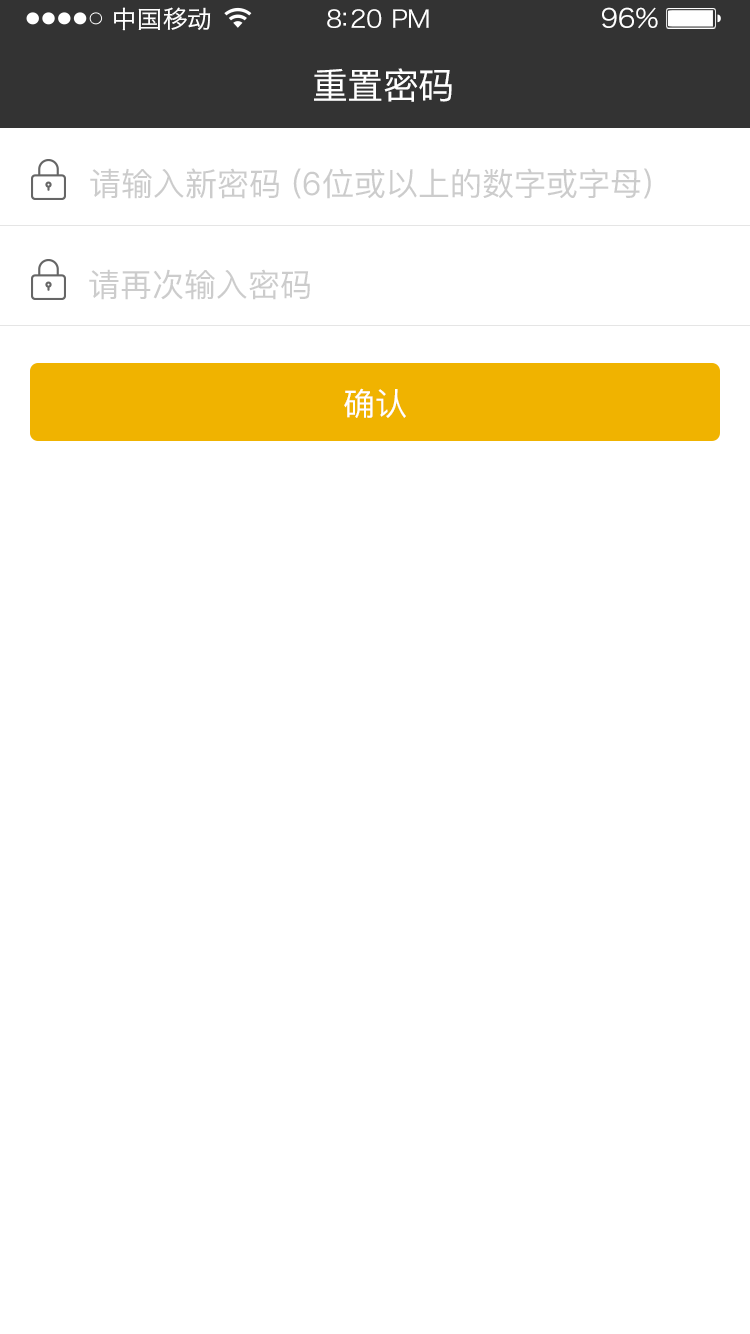
<style>
.page{position:relative;width:750px;height:1334px;background:#ffffff}
.page>*{position:absolute;margin:0}
.t1{font:24px "HiraginoSansGB-W3";letter-spacing:0.02em;color:#ffffff;scale:1.03 1}
.t2{font:24px "HiraginoSansGB-W3";letter-spacing:-0.02em;color:#ffffff;scale:1.03 1}
.t3{font:26.2px "HiraginoSansGB-W3";letter-spacing:-0.02em;color:#ffffff;scale:1.03 1}
.t4{font:36px "PingFang-SC-Medium";letter-spacing:-0.02em;color:#ffffff}
.t5{font:32px "PingFang-SC-Medium";color:#cccccc}
.t6{font:32px "PingFang-SC-Medium";color:#ffffff}
</style>
<div class="page">
<p class="t1" style="left:114px;top:7px;width:97px;height:24px">中国移动</p>
<p class="t2" style="left:327px;top:9px;width:102px;height:19px">8:20 PM</p>
<p class="t3" style="left:602px;top:7px;width:56px;height:22px">96%</p>
<p class="t4" style="left:314px;top:68px;width:138px;height:34px">重置密码</p>
<p class="t5" style="left:90px;top:168px;width:561px;height:31px">请输入新密码 (6位或以上的数字或字母)</p>
<p class="t5" style="left:89px;top:269px;width:221px;height:31px">请再次输入密码</p>
<p class="t6" style="left:344px;top:388px;width:62px;height:30px">确认</p>
</div>
